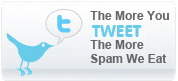
<style>
.page{position:relative;width:178px;height:81px}
.page>*{position:absolute;margin:0}
.t1{font:12px "Arial-BoldMT";color:#666667}
</style>
<div class="page">
<p class="t1" style="left:90px;top:11px;width:79px;height:54px">The More You<br><br>The More <br>Spam We Eat</p>
</div>
